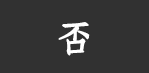
<style>
.page{position:relative;width:149px;height:73px;background:#313131}
.page>*{position:absolute;margin:0}
.t1{font:37.5px "DFFangSong-W6-WINP-BF";letter-spacing:0.04em;color:#ffffff;font-weight:bold}
</style>
<div class="page">
<p class="t1" style="left:58px;top:22px;width:32px;height:34px">否</p>
</div>
